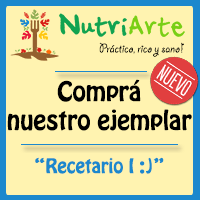
<style>
.page{position:relative;width:200px;height:200px;background:#fff3b0}
.page>*{position:absolute;margin:0}
.t1{font:14px "GiddyupStd";color:#000000}
.t2{font:24px "HoboStd";color:#000000}
.t3{font:18px "HoboStd";color:#1c88cd}
</style>
<div class="page">
<p class="t1" style="left:99px;top:42px;width:85px;height:15px">Práctico, rico y sano!</p>
<p class="t2" style="left:7px;top:79px;width:185px;height:95px;text-align:center">Comprá <br>nuestro ejemplar <br><br><span class="t3">“Recetario I :)”</span></p>
</div>
